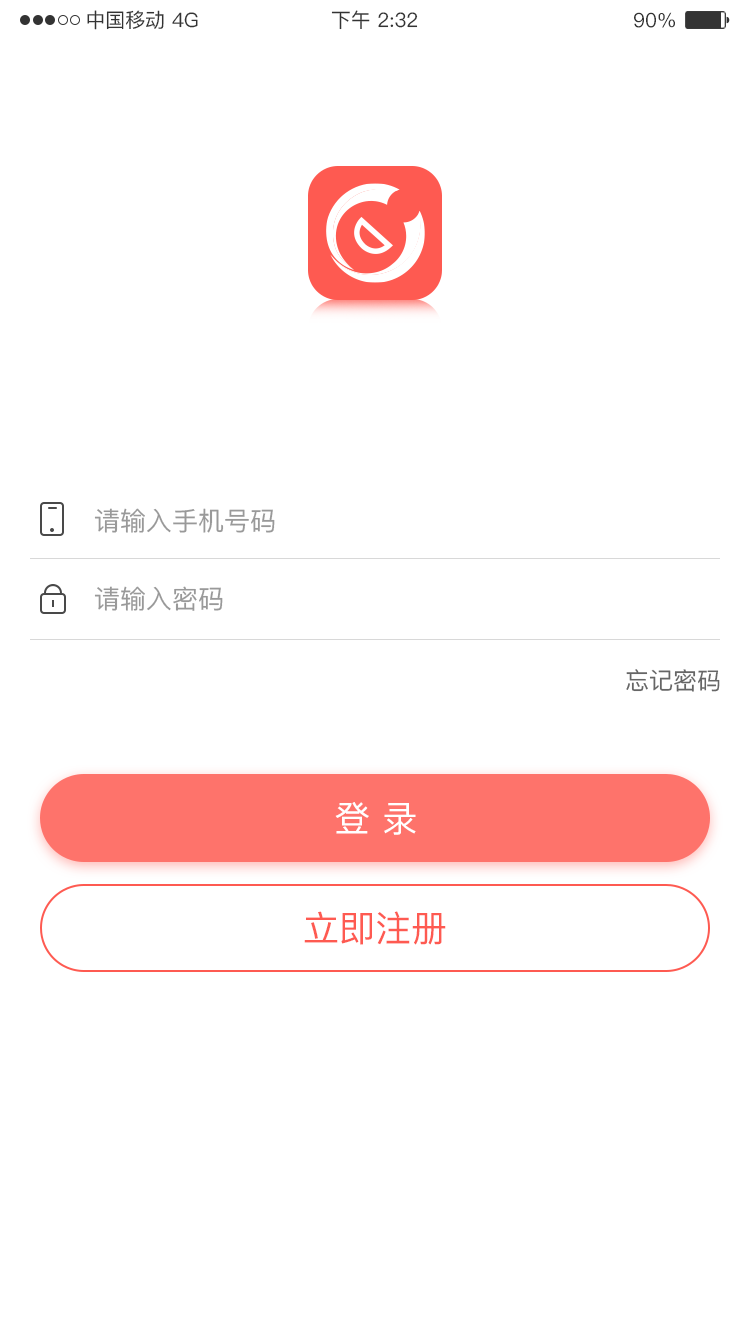
<style>
.page{position:relative;width:750px;height:1334px;background:#ffffff}
.page>*{position:absolute;margin:0}
.t1{font:20px "PingFang-SC-Medium";color:#333333}
.t2{font:26px "PingFang-SC-Medium";color:#999999}
.t3{font:24px "PingFang-SC-Medium";color:#666666}
.t4{font:36px "PingFang-SC-Medium";color:#ffffff}
.t5{font:36px "PingFang-SC-Medium";color:#fe5a51}
</style>
<div class="page">
<p class="t1" style="left:87px;top:10px;width:77px;height:20px">中国移动</p>
<p class="t1" style="left:172px;top:12px;width:26px;height:16px">4G</p>
<p class="t1" style="left:331px;top:10px;width:87px;height:20px">下午 2:32</p>
<p class="t1" style="left:634px;top:12px;width:41px;height:16px">90%</p>
<p class="t2" style="left:94px;top:508px;width:181px;height:25px">请输入手机号码</p>
<p class="t2" style="left:94px;top:586px;width:129px;height:25px">请输入密码</p>
<p class="t3" style="left:626px;top:669px;width:94px;height:23px">忘记密码</p>
<p class="t4" style="left:335px;top:802px;width:81px;height:33px">登 录</p>
<p class="t5" style="left:304px;top:911px;width:142px;height:34px">立即注册</p>
</div>
